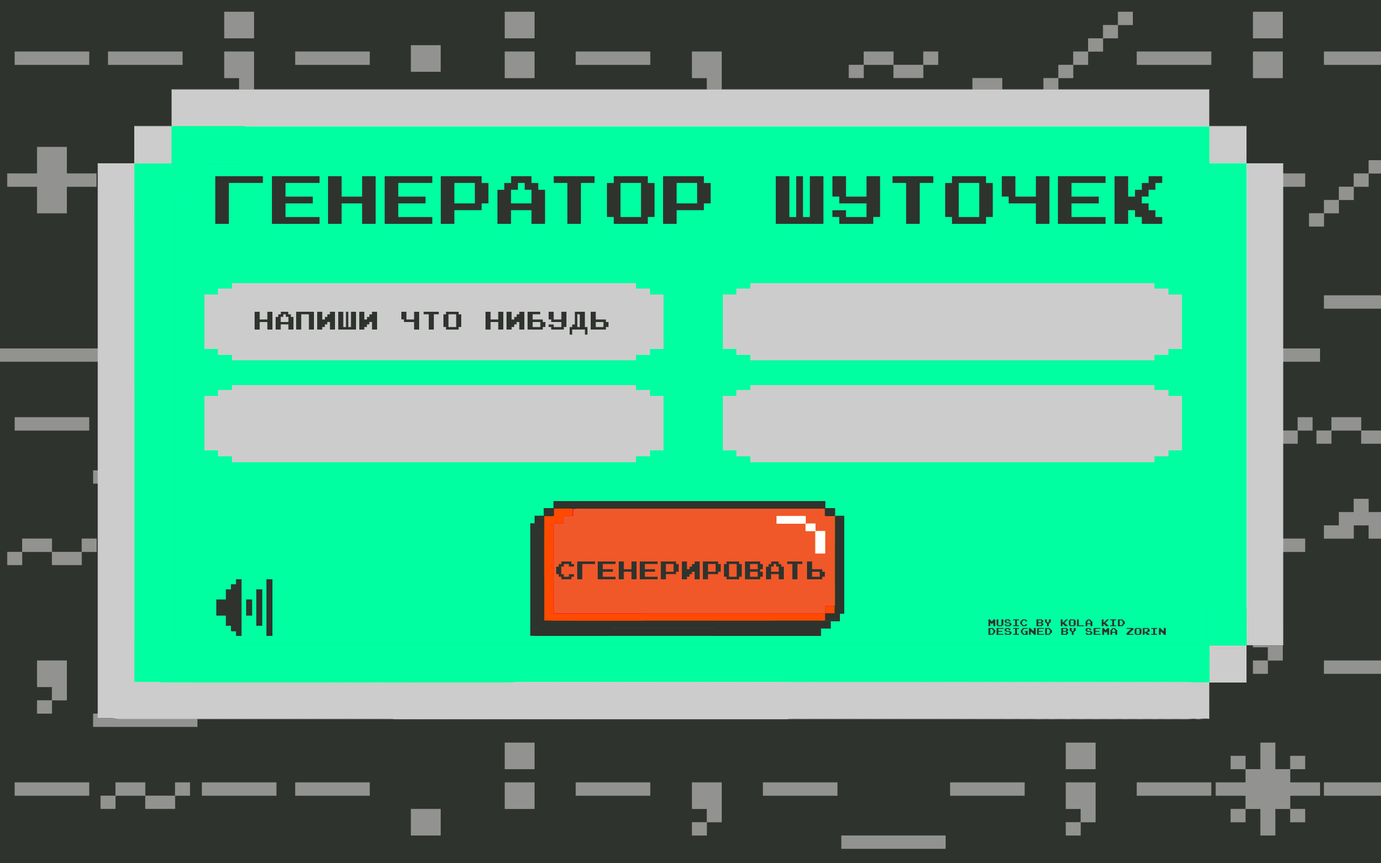
<style>
.page{position:relative;width:1381px;height:863px;background:#2f332e}
.page>*{position:absolute;margin:0}
.t1{font:68.1px "JoystixMonospace-Regular";color:#2f332e}
.t2{font:25.4px "JoystixMonospace-Regular";color:#2f332e}
.t3{font:9.8px/9px "JoystixMonospace-Regular";color:#2f332e}
</style>
<div class="page">
<p class="t1" style="left:215px;top:176px;width:948px;height:48px">Генератор шуточек</p>
<p class="t2" style="left:255px;top:312px;width:354px;height:23px">напиши что нибудь</p>
<p class="t2" style="left:556px;top:562px;width:269px;height:17px">сгенерировать</p>
<p class="t3" style="left:988px;top:619px;width:178px;height:16px">music by Kola kid<br>designed by sema zorin</p>
</div>
